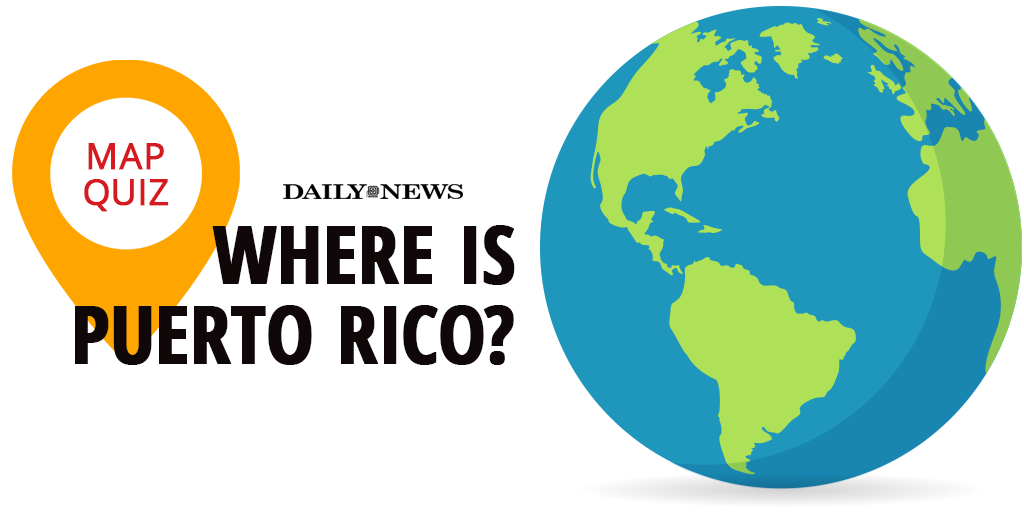
<style>
.page{position:relative;width:1024px;height:512px;background:#ffffff}
.page>*{position:absolute;margin:0}
.t1{font:36px/36px "OpenSans";letter-spacing:0.005em;color:#d71920;text-transform:uppercase;font-weight:bold}
.t2{font:80px/80px "OpenSans-CondensedBold";color:#0f0708;text-transform:uppercase;font-weight:bold}
</style>
<div class="page">
<p class="t1" style="left:84px;top:143px;width:85px;height:69px;text-align:center">MAP<br>QUIZ</p>
<p class="t2" style="left:75px;top:225px;width:440px;height:140px;text-align:right">WHERE IS<br>PUERTO RICO?</p>
</div>
